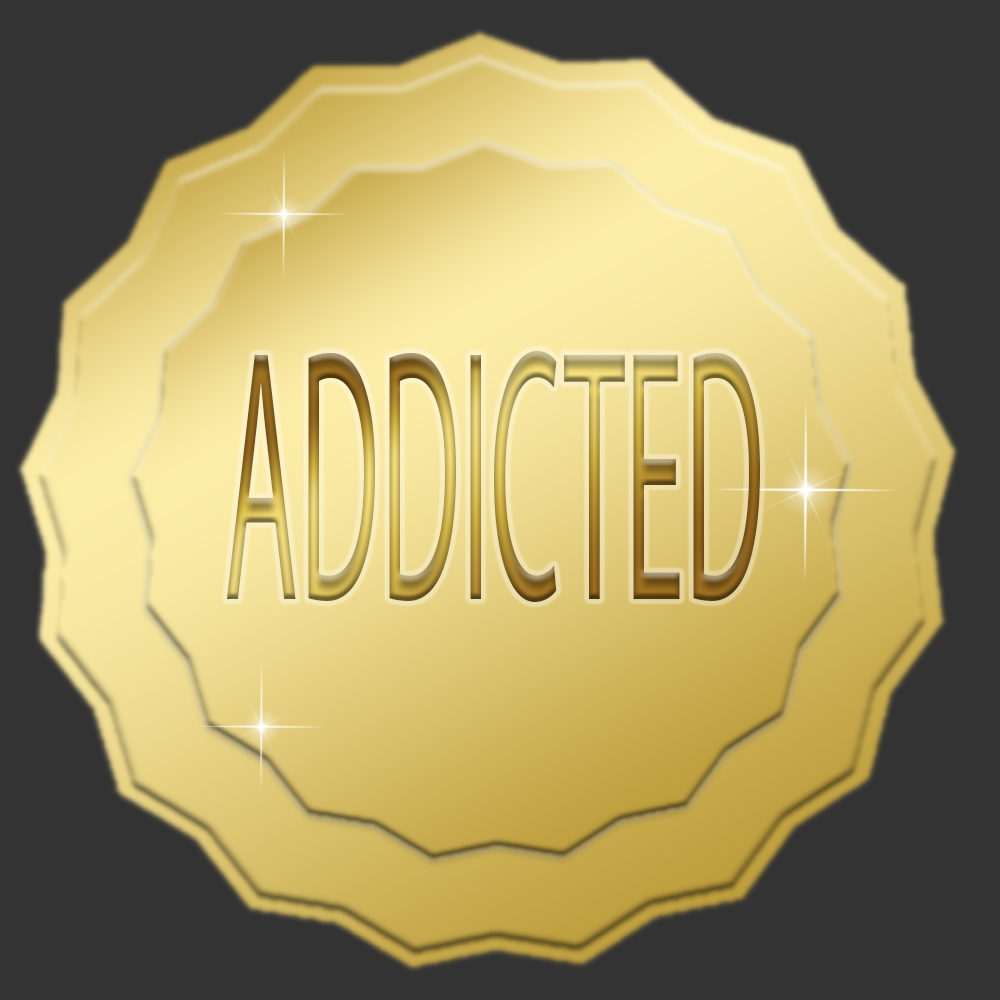
<style>
.page{position:relative;width:1000px;height:1000px;background:#333333}
.page>*{position:absolute;margin:0}
.t1{font:361.4px "MyriadPro-Regular";scale:0.34 1}
</style>
<div class="page">
<p class="t1" style="left:227px;top:350px;width:533px;height:253px">ADDICTED</p>
</div>
